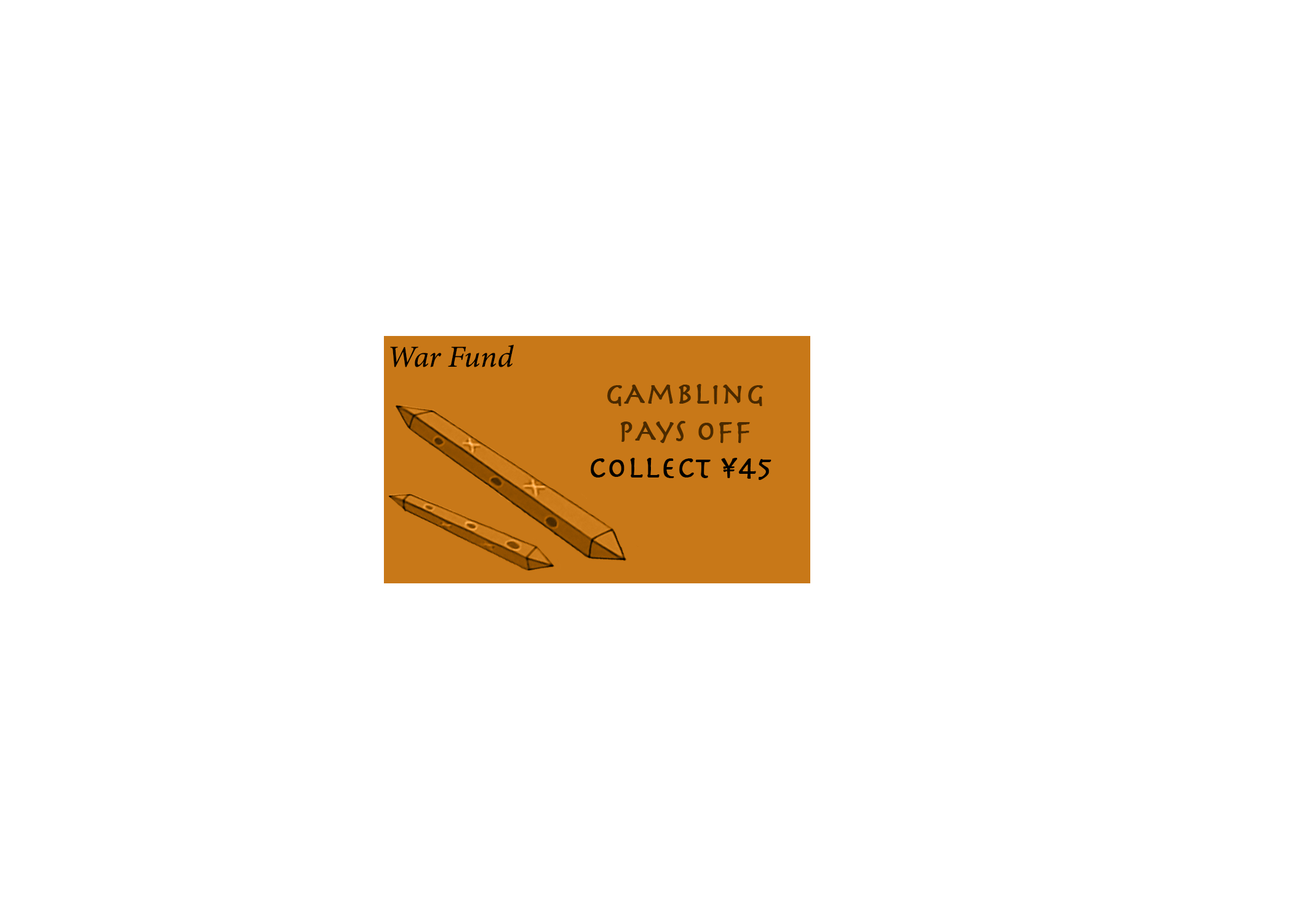
<style>
.page{position:relative;width:1292px;height:923px;background:#ffffff}
.page>*{position:absolute;margin:0}
.t1{font:30.8px "MinionConceptItalic-MediumItalic";color:#000000;font-weight:bold}
.t2{font:30.8px "Herculanum";color:#4d310e;font-weight:bold}
.t3{font:30.8px "Herculanum";color:#000000;font-weight:bold}
</style>
<div class="page">
<p class="t1" style="left:390px;top:345px;width:124px;height:22px">War Fund</p>
<p class="t2" style="left:591px;top:384px;width:181px;height:96px;text-align:center">gAmbling<br>pAys off<br><span class="t3">Collect ¥45</span></p>
</div>
